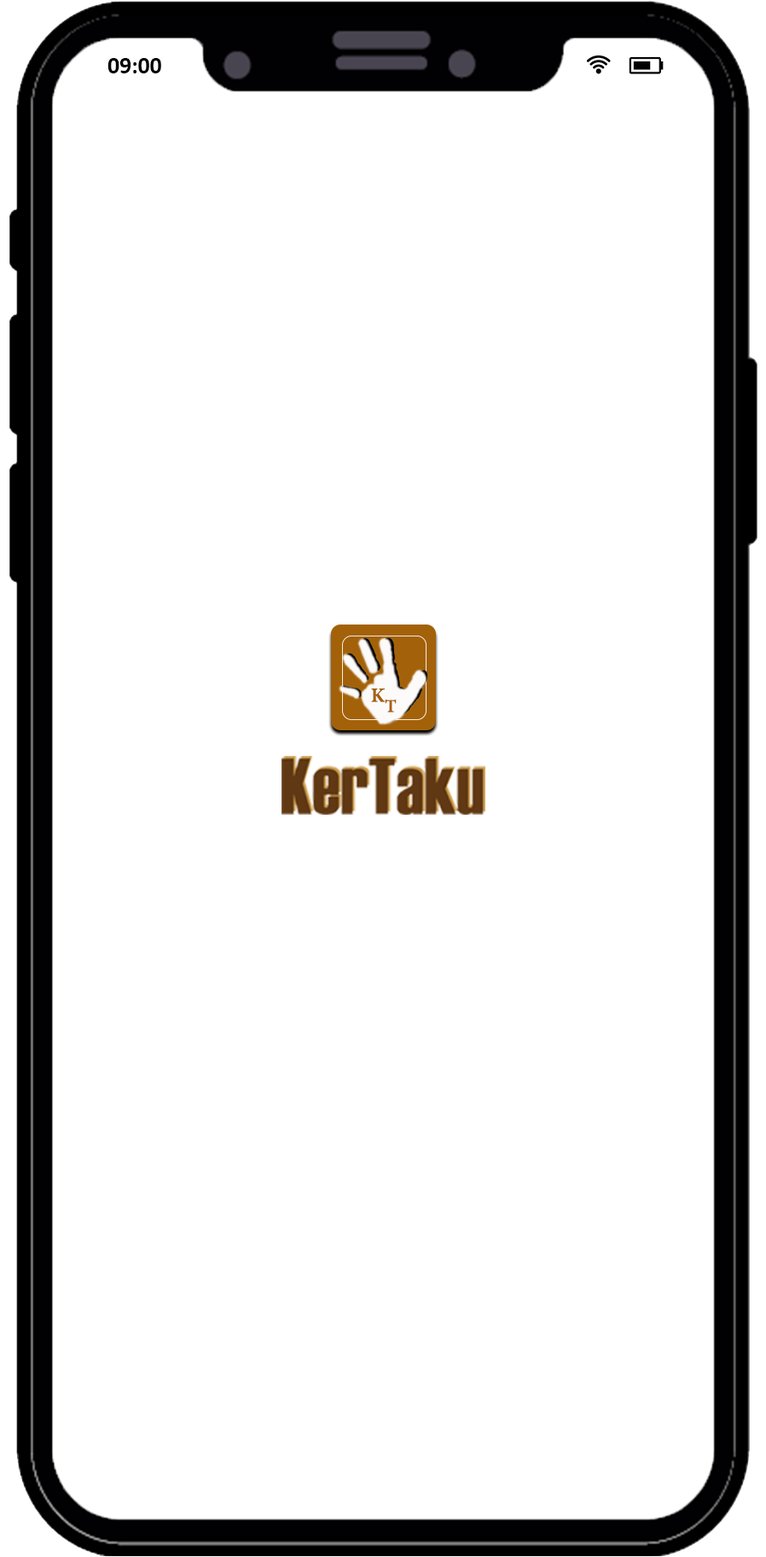
<style>
.page{position:relative;width:766px;height:1557px;background:#ffffff}
.page>*{position:absolute;margin:0}
.t1{font:23.6px "Calibri-Bold";color:#000000}
.t2{font:20.2px "MinionPro-Bold";color:#a36209}
.t3{font:18.2px "MinionPro-Bold";color:#a36209}
</style>
<div class="page">
<p class="t1" style="left:107px;top:58px;width:54px;height:15px">09:00</p>
<p class="t2" style="left:371px;top:688px;width:15px;height:14px">K</p>
<p class="t3" style="left:385px;top:699px;width:12px;height:13px">T</p>
</div>
